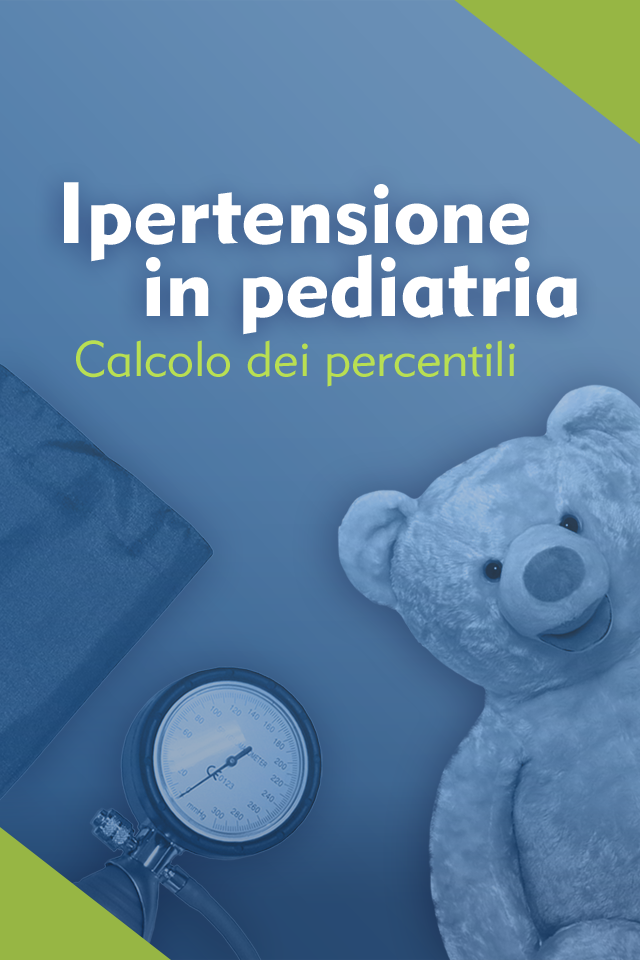
<style>
.page{position:relative;width:640px;height:960px}
.page>*{position:absolute;margin:0}
.t1{font:85.8px/72.7px "Geometric415BT-BlackA";color:#ffffff}
.t2{font:49.5px "Geometric415BT-LiteA";color:#b9df52}
</style>
<div class="page">
<p class="t1" style="left:64px;top:182px;width:514px;height:153px;text-align:right">Ipertensione  <br>in pediatria</p>
<p class="t2" style="left:76px;top:340px;width:439px;height:47px">Calcolo dei percentili</p>
</div>
